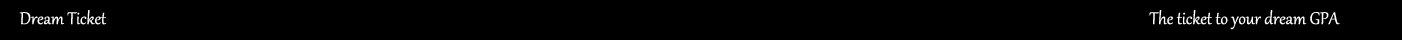
<style>
.page{position:relative;width:1402px;height:40px;background:#000000}
.page>*{position:absolute;margin:0}
.t1{font:20.8px "Gabriola";color:#ffffff}
</style>
<div class="page">
<p class="t1" style="left:19px;top:10px;width:88px;height:15px">Dream Ticket</p>
<p class="t1" style="left:1149px;top:10px;width:191px;height:20px">The ticket to your dream GPA</p>
</div>
